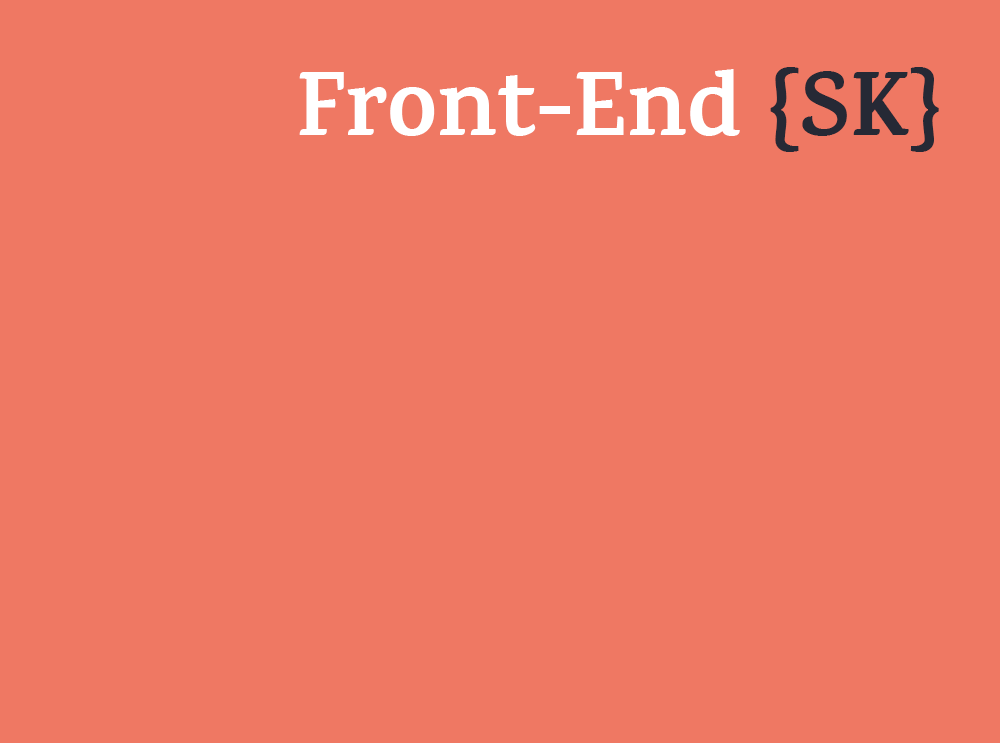
<style>
.page{position:relative;width:1000px;height:743px;background:#ef7863}
.page>*{position:absolute;margin:0}
.t1{font:93px "Karma-Bold";color:#ffffff}
.t2{font:93px "Karma-Bold";color:#262935}
</style>
<div class="page">
<p class="t1" style="left:299px;top:67px;width:640px;height:85px">Front-End <span class="t2">{SK}</span></p>
</div>
